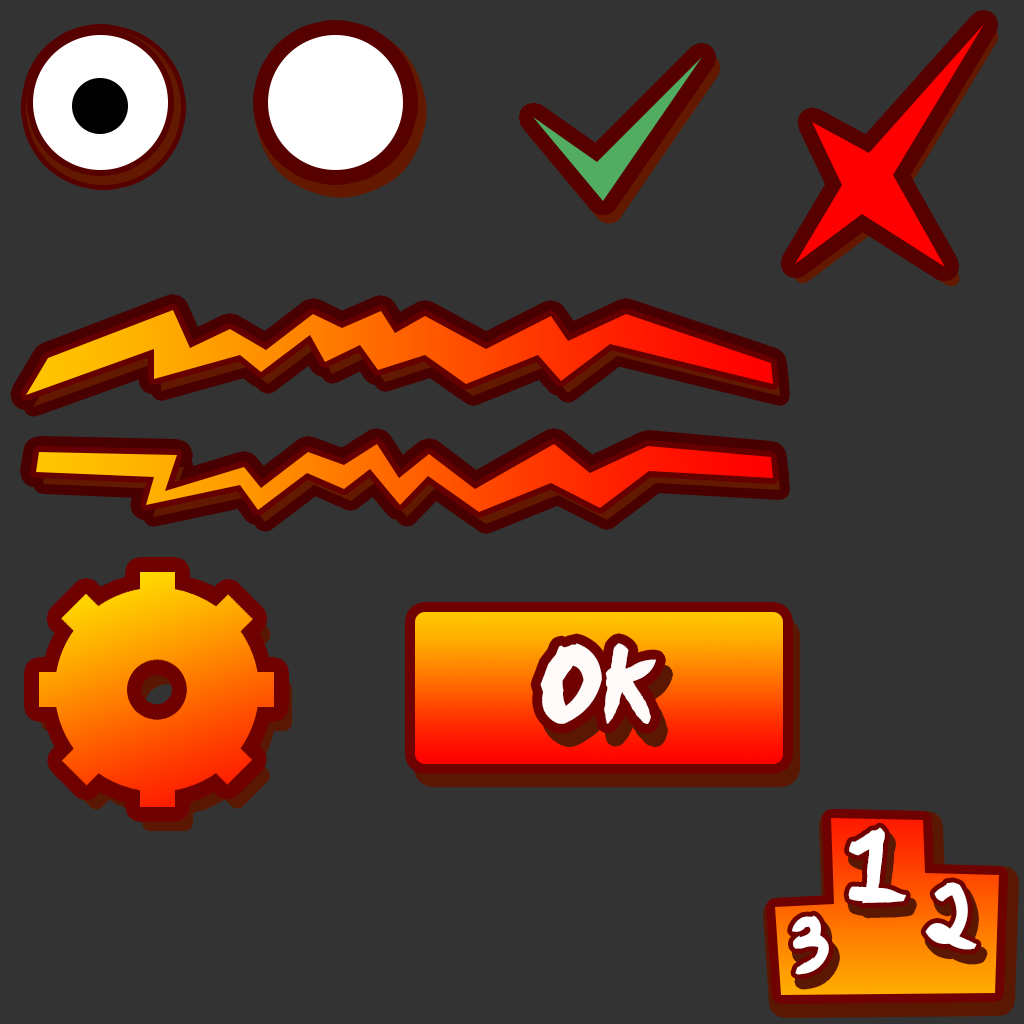
<style>
.page{position:relative;width:1024px;height:1024px;background:#333333}
.page>*{position:absolute;margin:0}
.t1{font:89.3px "Ninja-Naruto";color:#fffbfb}
.t2{font:83.4px "Ninja-Naruto";color:#ffffff}
.t3{font:70.9px "Ninja-Naruto";color:#ffffff}
.t4{font:62.4px "Ninja-Naruto";color:#ffffff}
</style>
<div class="page">
<p class="t1" style="left:540px;top:643px;width:116px;height:81px">OK</p>
<p class="t2" style="left:848px;top:827px;width:58px;height:77px;rotate:-5deg">1</p>
<p class="t3" style="left:925px;top:882px;width:52px;height:68px;rotate:10deg">2</p>
<p class="t4" style="left:792px;top:915px;width:37px;height:60px;rotate:-8deg">3</p>
</div>
